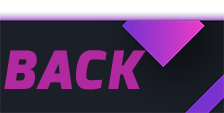
<style>
.page{position:relative;width:224px;height:113px;background:#1b1f28}
.page>*{position:absolute;margin:0}
.t1{font:52.5px "Exo-BlackItalic";color:#b1299f}
</style>
<div class="page">
<p class="t1" style="left:4px;top:50px;width:33px;height:39px">B</p>
<p class="t1" style="left:36px;top:50px;width:36px;height:39px">A</p>
<p class="t1" style="left:76px;top:50px;width:31px;height:40px">C</p>
<p class="t1" style="left:108px;top:50px;width:38px;height:39px">K</p>
</div>
